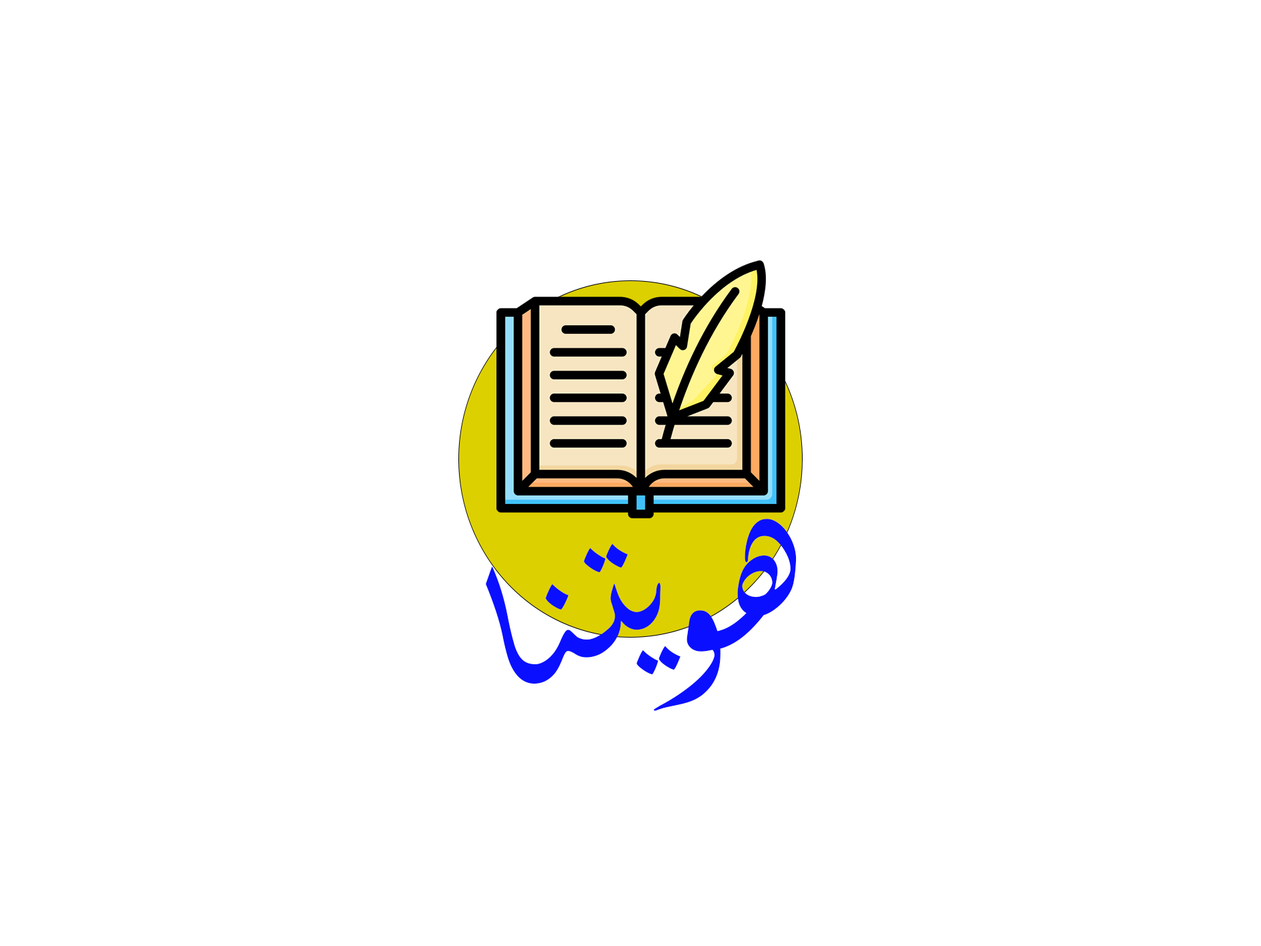
<style>
.page{position:relative;width:1261px;height:946px;background:#ffffff}
.page>*{position:absolute;margin:0}
.t1{font:278px "Aldhabi";color:#0a10ff}
</style>
<div class="page">
<p class="t1" style="left:486px;top:518px;width:311px;height:193px">هويتنا</p>
</div>
